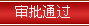
<style>
.page{position:relative;width:89px;height:26px}
.page>*{position:absolute;margin:0}
.t1{font:14px "SimSun";color:#f7eef1}
</style>
<div class="page">
<p class="t1" style="left:15px;top:5px;width:55px;height:13px">审批通过</p>
</div>
